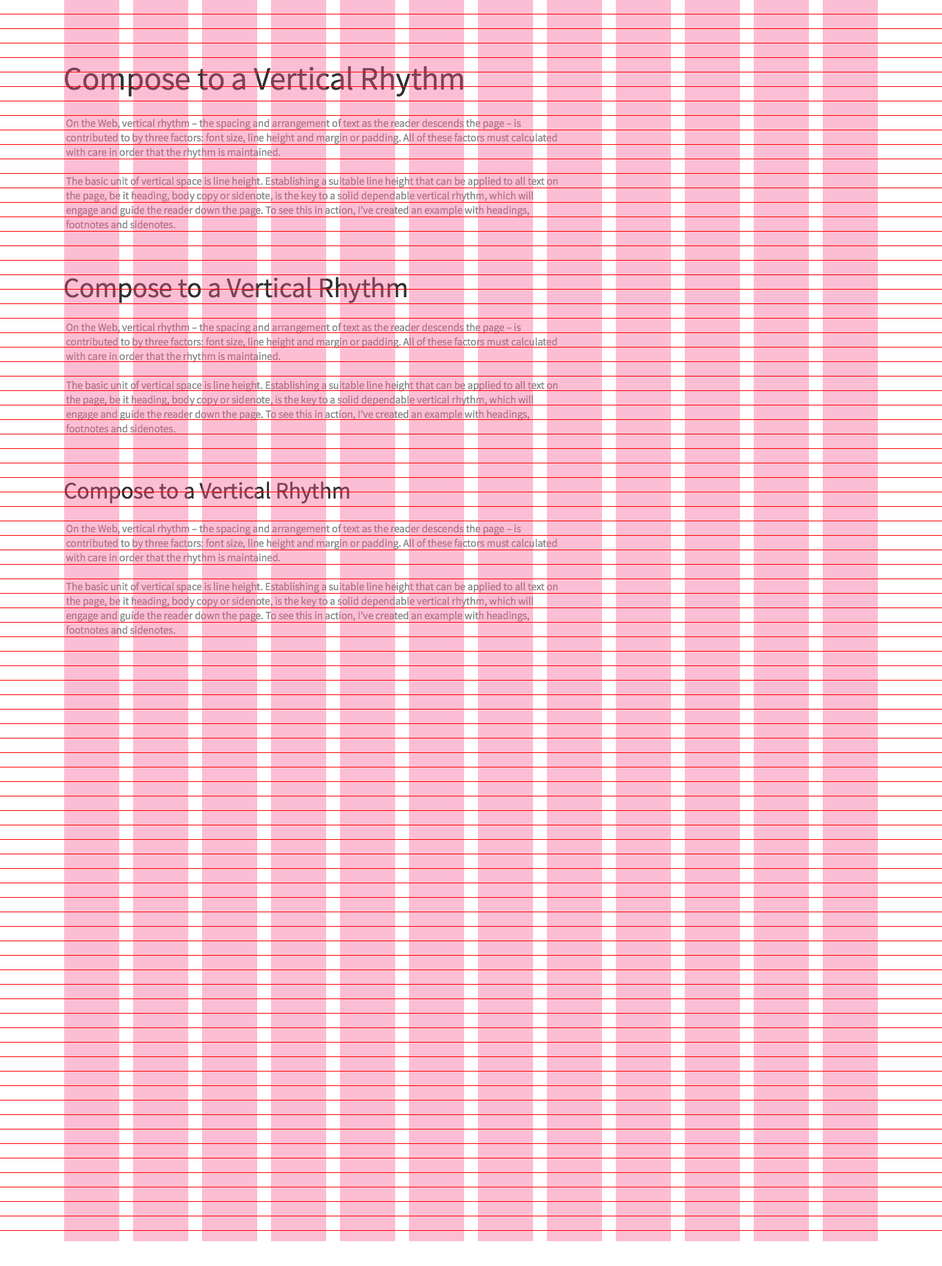
<style>
.page{position:relative;width:942px;height:1266px;background:#fcbed4}
.page>*{position:absolute;margin:0}
.t1{font:29px "SourceHanSansKR-Normal";color:#814258}
.t2{font:9.7px/14.5px "SourceHanSansKR-Normal";color:#b3758b}
.t3{font:24.8px "SourceHanSansKR-Normal";color:#814258}
.t4{font:20.7px "SourceHanSansKR-Normal";color:#814258}
</style>
<div class="page">
<p class="t1" style="left:65px;top:66px;width:398px;height:31px">Compose to a Vertical Rhythm</p>
<p class="t2" style="left:66px;top:119px;width:492px;height:110px">On the Web, vertical rhythm – the spacing and arrangement of text as the reader descends the page – is contributed to by three factors: font size, line height and margin or padding. All of these factors must calculated with care in order that the rhythm is maintained.<br>The basic unit of vertical space is line height. Establishing a suitable line height that can be applied to all text on the page, be it heading, body copy or sidenote, is the key to a solid dependable vertical rhythm, which will engage and guide the reader down the page. To see this in action, I’ve created an example with headings, footnotes and sidenotes.</p>
<p class="t3" style="left:64px;top:277px;width:343px;height:26px">Compose to a Vertical Rhythm</p>
<p class="t2" style="left:66px;top:323px;width:492px;height:110px">On the Web, vertical rhythm – the spacing and arrangement of text as the reader descends the page – is contributed to by three factors: font size, line height and margin or padding. All of these factors must calculated with care in order that the rhythm is maintained.<br>The basic unit of vertical space is line height. Establishing a suitable line height that can be applied to all text on the page, be it heading, body copy or sidenote, is the key to a solid dependable vertical rhythm, which will engage and guide the reader down the page. To see this in action, I’ve created an example with headings, footnotes and sidenotes.</p>
<p class="t4" style="left:64px;top:481px;width:286px;height:23px">Compose to a Vertical Rhythm</p>
<p class="t2" style="left:66px;top:524px;width:492px;height:110px">On the Web, vertical rhythm – the spacing and arrangement of text as the reader descends the page – is contributed to by three factors: font size, line height and margin or padding. All of these factors must calculated with care in order that the rhythm is maintained.<br>The basic unit of vertical space is line height. Establishing a suitable line height that can be applied to all text on the page, be it heading, body copy or sidenote, is the key to a solid dependable vertical rhythm, which will engage and guide the reader down the page. To see this in action, I’ve created an example with headings, footnotes and sidenotes.</p>
</div>
